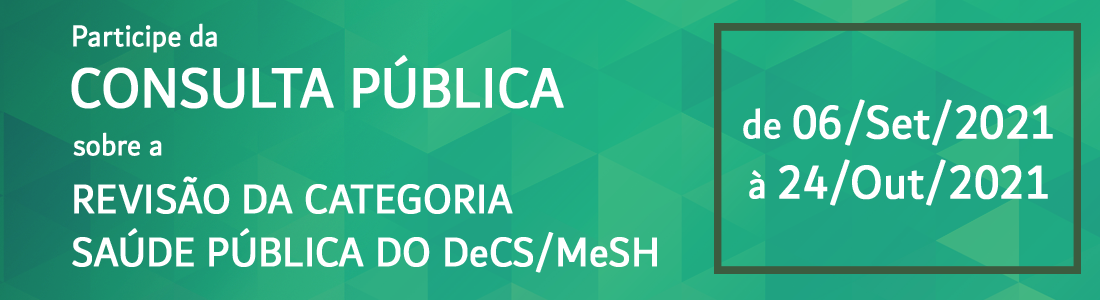
<style>
.page{position:relative;width:1100px;height:300px}
.page>*{position:absolute;margin:0}
.t1{font:32px "Dubai-Regular";color:#ffffff;font-weight:bold;scale:0.9 1}
.t2{font:60px "Dubai-Regular";color:#ffffff;font-weight:bold;scale:0.9 1}
.t3{font:50px "Dubai-Regular";color:#ffffff;font-weight:bold;scale:0.9 1}
.t4{font:42.6px "Dubai-Regular";color:#ffffff;font-weight:bold;scale:0.9 1}
.t5{font:44px "Dubai-Regular";color:#ffffff;font-weight:bold;scale:0.9 1}
</style>
<div class="page">
<p class="t1" style="left:73px;top:23px;width:144px;height:30px">Participe da</p>
<p class="t2" style="left:71px;top:55px;width:493px;height:54px">CONSULTA PÚBLICA</p>
<p class="t3" style="left:743px;top:99px;width:310px;height:107px;text-align:center"><span class="t4">de </span>06/Set/2021<br><span class="t4">à </span>24/Out/2021</p>
<p class="t1" style="left:73px;top:132px;width:89px;height:24px">sobre a</p>
<p class="t5" style="left:72px;top:176px;width:585px;height:97px">REVISÃO DA CATEGORIA<br>SAÚDE PÚBLICA DO DeCS/MeSH</p>
</div>
